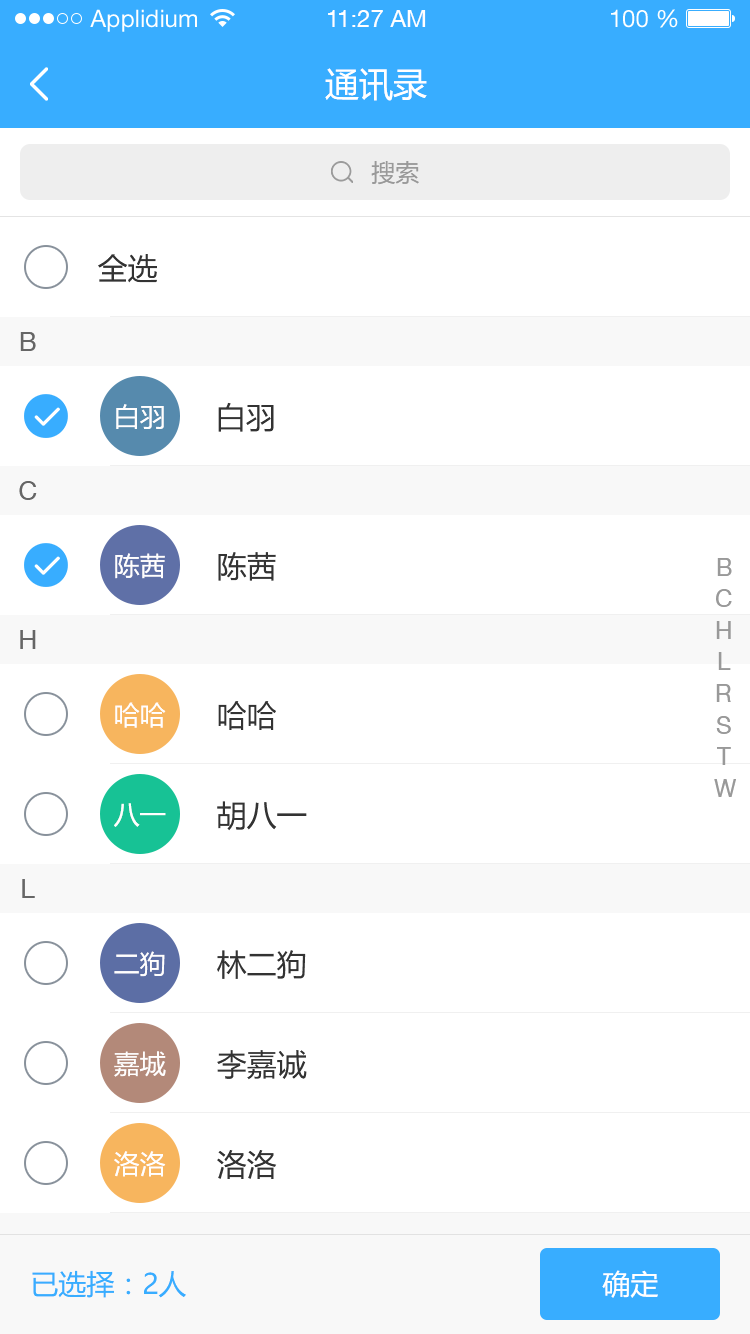
<style>
.page{position:relative;width:750px;height:1334px;background:#ffffff}
.page>*{position:absolute;margin:0}
.t1{font:24px "HelveticaNeueLTStd-Roman";color:#ffffff}
.t2{font:24px "HelveticaNeueCE-Roman";color:#ffffff}
.t3{font:34px "MicrosoftYaHei";color:#ffffff}
.t4{font:24px "MicrosoftYaHei";color:#999999}
.t5{font:30px "MicrosoftYaHei";color:#333333}
.t6{font:26px "HelveticaNeueLTPro-Roman";color:#666666}
.t7{font:26px "MicrosoftYaHei";color:#fffefe}
.t8{font:24px "HelveticaNeueLTPro-Roman";color:#999999}
.t9{font:28px "MicrosoftYaHei";color:#38adff}
.t10{font:28px "MicrosoftYaHei";color:#ffffff}
</style>
<div class="page">
<p class="t1" style="left:90px;top:9px;width:107px;height:23px">Applidium</p>
<p class="t2" style="left:328px;top:10px;width:98px;height:17px">11:27 AM</p>
<p class="t1" style="left:611px;top:9px;width:67px;height:19px">100 %</p>
<p class="t3" style="left:325px;top:68px;width:102px;height:33px">通讯录</p>
<p class="t4" style="left:371px;top:161px;width:48px;height:24px">搜索</p>
<p class="t5" style="left:98px;top:254px;width:59px;height:29px">全选</p>
<p class="t6" style="left:20px;top:332px;width:16px;height:19px">B</p>
<p class="t7" style="left:116px;top:404px;width:48px;height:25px">白羽</p>
<p class="t5" style="left:218px;top:402px;width:56px;height:30px">白羽</p>
<p class="t6" style="left:19px;top:481px;width:18px;height:19px">C</p>
<p class="t7" style="left:115px;top:553px;width:50px;height:26px">陈茜</p>
<p class="t5" style="left:218px;top:552px;width:58px;height:29px">陈茜</p>
<p class="t8" style="left:717px;top:558px;width:15px;height:18px">B</p>
<p class="t8" style="left:716px;top:589px;width:16px;height:18px">C</p>
<p class="t6" style="left:20px;top:630px;width:16px;height:19px">H</p>
<p class="t8" style="left:716px;top:621px;width:15px;height:18px">H</p>
<p class="t8" style="left:718px;top:652px;width:13px;height:18px">L</p>
<p class="t8" style="left:716px;top:684px;width:15px;height:18px">R</p>
<p class="t7" style="left:115px;top:702px;width:51px;height:26px">哈哈</p>
<p class="t5" style="left:218px;top:701px;width:58px;height:29px">哈哈</p>
<p class="t8" style="left:716px;top:716px;width:15px;height:18px">S</p>
<p class="t8" style="left:717px;top:747px;width:14px;height:18px">T</p>
<p class="t8" style="left:714px;top:779px;width:22px;height:18px">W</p>
<p class="t7" style="left:114px;top:803px;width:52px;height:24px">八一</p>
<p class="t5" style="left:217px;top:801px;width:90px;height:30px">胡八一</p>
<p class="t6" style="left:22px;top:879px;width:13px;height:19px">L</p>
<p class="t7" style="left:114px;top:951px;width:51px;height:26px">二狗</p>
<p class="t5" style="left:217px;top:950px;width:89px;height:29px">林二狗</p>
<p class="t7" style="left:114px;top:1051px;width:52px;height:26px">嘉城</p>
<p class="t5" style="left:217px;top:1050px;width:90px;height:30px">李嘉诚</p>
<p class="t7" style="left:114px;top:1151px;width:52px;height:26px">洛洛</p>
<p class="t5" style="left:217px;top:1150px;width:60px;height:29px">洛洛</p>
<p class="t9" style="left:32px;top:1270px;width:154px;height:28px">已选择：2人</p>
<p class="t10" style="left:602px;top:1270px;width:56px;height:28px">确定</p>
</div>
